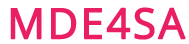
<style>
.page{position:relative;width:189px;height:44px;background:#ffffff}
.page>*{position:absolute;margin:0}
.t1{font:41.8px "OpenSans";letter-spacing:0.035em;color:#e91e63;text-transform:uppercase;font-weight:bold}
.t2{font:38px "MalgunGothic";letter-spacing:0.035em;color:#e91e63;text-transform:uppercase}
</style>
<div class="page">
<p class="t1" style="left:10px;top:7px;width:176px;height:33px"><span class="t2"> </span>MDE4SA</p>
</div>
